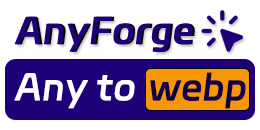
<style>
.page{position:relative;width:260px;height:130px;background:#ffffff}
.page>*{position:absolute;margin:0}
.t1{font:36px "DingTalk-JinBuTi";letter-spacing:0.01em;color:#1e0079;font-weight:bold}
.t2{font:36px "DingTalk-JinBuTi";letter-spacing:0.01em;font-weight:bold}
.t3{font:36px "DingTalk-JinBuTi";color:#ffffff;font-weight:bold}
.t4{font:36px "DingTalk-JinBuTi";color:#110044;font-weight:bold}
</style>
<div class="page">
<p class="t1" style="left:14px;top:16px;width:179px;height:36px">AnyForge</p>
<p class="t2" style="left:16px;top:16px;width:179px;height:36px">AnyForge</p>
<p class="t3" style="left:14px;top:73px;width:121px;height:36px">Any to</p>
<p class="t4" style="left:150px;top:72px;width:96px;height:37px">webp</p>
</div>
